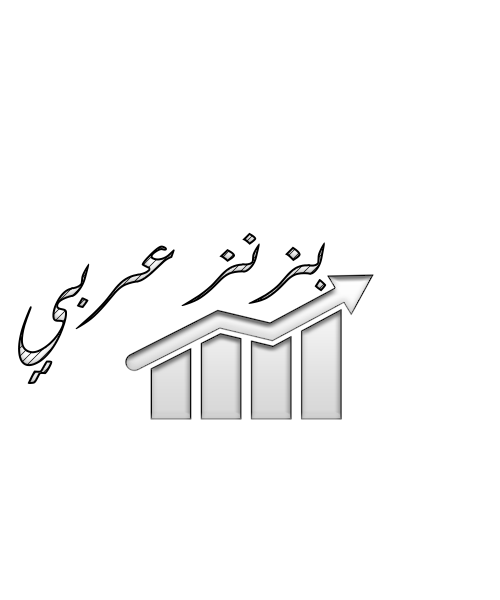
<style>
.page{position:relative;width:500px;height:600px;background:#ffffff}
.page>*{position:absolute;margin:0}
.t1{font:117.6px "FarsiSimpleBold";scale:0.78 1}
</style>
<div class="page">
<p class="t1" style="left:18px;top:232px;width:309px;height:152px;rotate:-7deg">بزنز عربي</p>
</div>
